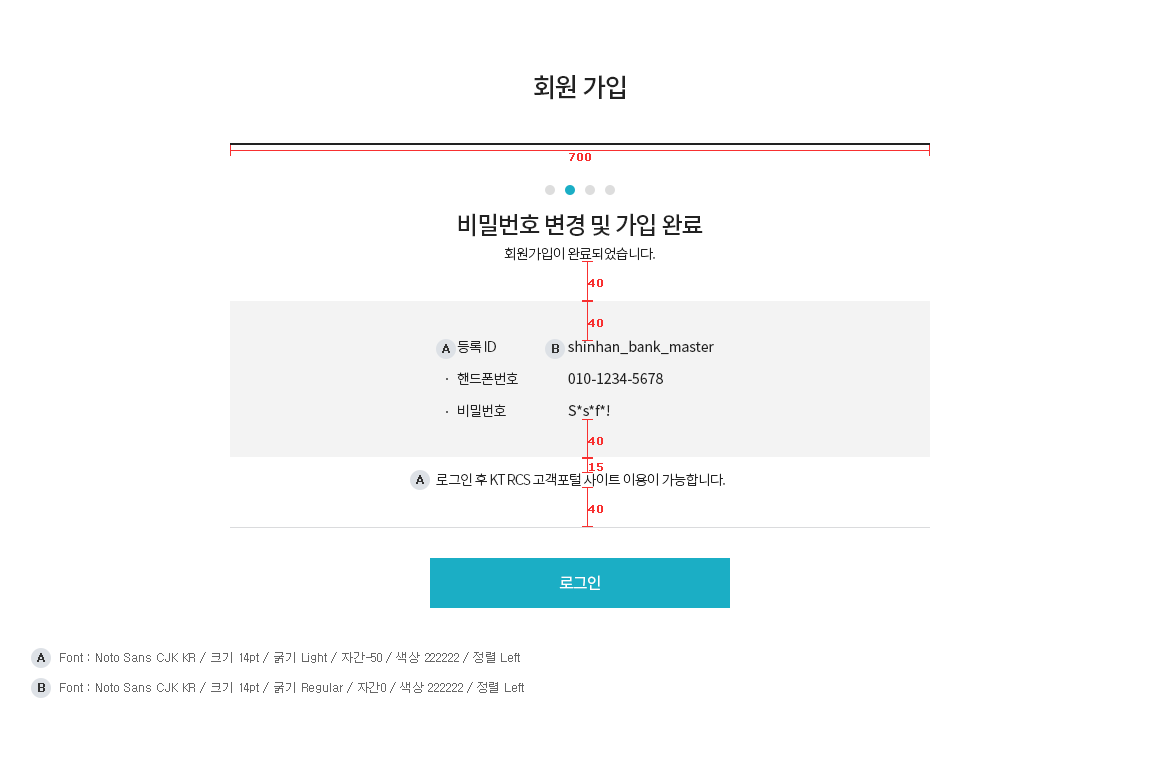
<style>
.page{position:relative;width:1160px;height:758px;background:#ffffff}
.page>*{position:absolute;margin:0}
.t1{font:26px "NotoSansCJKkr-Medium";letter-spacing:-0.075em;color:#222222;text-transform:uppercase}
.t2{font:11px "Verdana";color:#f83030;font-weight:bold}
.t3{font:24px/25px "NotoSansCJKkr-Medium";letter-spacing:-0.05em;color:#222222}
.t4{font:14px/25px "NotoSansCJKkr-Light";letter-spacing:-0.05em;color:#222222}
.t5{font:14px/32px "NotoSansCJKkr-Light";letter-spacing:-0.05em;color:#222222;text-transform:uppercase}
.t6{font:14px/32px "NotoSansCJKkr-Regular";color:#222222}
.t7{font:14px "NotoSansCJKkr-Light";letter-spacing:-0.05em;color:#222222;text-transform:uppercase}
.t8{font:16px "NotoSansCJKkr-Regular";letter-spacing:-0.05em;color:#ffffff;text-transform:uppercase}
.t9{font:12px "Dotum";color:#323232;font-weight:bold}
.t10{font:12px "Dotum";color:#666666}
</style>
<div class="page">
<p class="t1" style="left:534px;top:75px;width:91px;height:25px">회원 가입</p>
<p class="t2" style="left:569px;top:153px;width:22px;height:8px">700</p>
<p class="t3" style="left:458px;top:213px;width:245px;height:48px;text-align:center">비밀번호 변경 및 가입 완료<br><span class="t4">회원가입이 완료되었습니다.</span></p>
<p class="t2" style="left:588px;top:279px;width:15px;height:8px">40</p>
<p class="t5" style="left:457px;top:341px;width:61px;height:77px">등록 ID<br>핸드폰번호<br>비밀번호</p>
<p class="t6" style="left:568px;top:340px;width:146px;height:76px">shinhan_bank_master<br>010-1234-5678<br>S*s*f*!</p>
<p class="t7" style="left:436px;top:473px;width:289px;height:14px">로그인 후 KT RCS 고객포털 사이트 이용이 가능합니다.</p>
<p class="t2" style="left:589px;top:463px;width:14px;height:8px">15</p>
<p class="t8" style="left:559px;top:575px;width:41px;height:15px">로그인</p>
<p class="t9" style="left:37px;top:653px;width:8px;height:9px">A</p>
<p class="t10" style="left:60px;top:652px;width:460px;height:11px">Font : Noto Sans CJK KR / 크기 14pt / 굵기 Light / 자간-50 / 색상 222222 / 정렬 Left</p>
<p class="t9" style="left:38px;top:683px;width:7px;height:9px">B</p>
<p class="t10" style="left:60px;top:682px;width:464px;height:11px">Font : Noto Sans CJK KR / 크기 14pt / 굵기 Regular / 자간0 / 색상 222222 / 정렬 Left</p>
</div>
